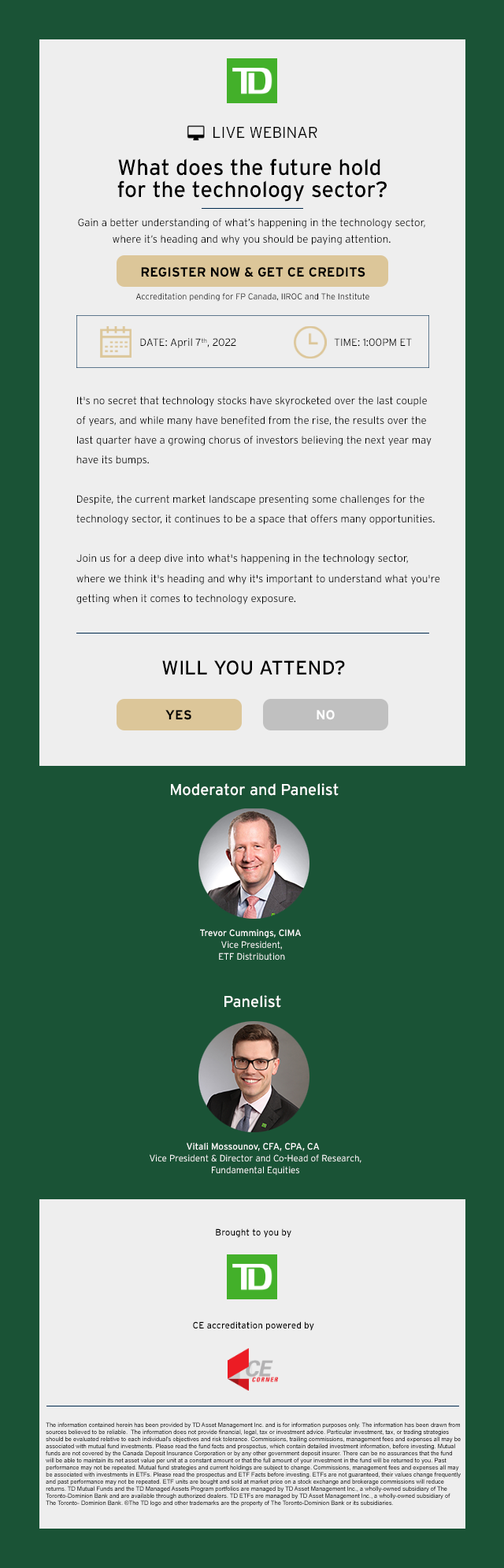
<style>
.page{position:relative;width:504px;height:1568px;background:#1a5336}
.page>*{position:absolute;margin:0}
.t1{font:15.8px "Interstate-Light";color:#000000}
.t2{font:22.1px/22.1px "Interstate-Regular";color:#000000}
.t3{font:10.5px/15.8px "Interstate-Light";color:#000000}
.t4{font:13.2px "Interstate-Bold";color:#000000}
.t5{font:8.6px "Interstate-Light";color:#000000}
.t6{font:10.5px "Interstate-Light";color:#000000}
.t7{font:10.5px/19.7px "Interstate-Light";color:#000000}
.t8{font:19.7px "Interstate-Regular";color:#000000}
.t9{font:13.2px "Interstate-Bold";color:#ffffff}
.t10{font:15.8px "Interstate-Regular";color:#ffffff}
.t11{font:9.2px/11.8px "Interstate-Light";color:#ffffff}
.t12{font:9.2px/11.8px "Interstate-Regular";color:#ffffff}
.t13{font:9.2px "Interstate-Regular";color:#000000}
.t14{font:5.9px "ArialMT";color:#000000}
</style>
<div class="page">
<p class="t1" style="left:214px;top:127px;width:104px;height:11px">LIVE WEBINAR</p>
<p class="t2" style="left:117px;top:158px;width:270px;height:44px;text-align:center">What does the future hold <br>for the technology sector?</p>
<p class="t3" style="left:78px;top:218px;width:347px;height:27px;text-align:center">Gain a better understanding of what’s happening in the technology sector, <br>where it’s heading and why you should be paying attention.</p>
<p class="t4" style="left:141px;top:267px;width:225px;height:10px">REGISTER NOW &amp; GET CE CREDITS</p>
<p class="t5" style="left:136px;top:293px;width:234px;height:8px">Accreditation pending for FP Canada, IIROC and The Institute</p>
<p class="t6" style="left:140px;top:338px;width:96px;height:10px">DATE: April 7th, 2022</p>
<p class="t6" style="left:334px;top:338px;width:78px;height:9px">TIME: 1:00PM ET</p>
<p class="t7" style="left:76px;top:396px;width:364px;height:208px">It's no secret that technology stocks have skyrocketed over the last couple <br>of years, and while many have benefited from the rise, the results over the <br>last quarter have a growing chorus of investors believing the next year may <br>have its bumps. <br> <br>Despite, the current market landscape presenting some challenges for the<br>technology sector, it continues to be a space that offers many opportunities.<br> <br>Join us for a deep dive into what's happening in the technology sector, <br>where we think it's heading and why it's important to understand what you're<br>getting when it comes to technology exposure.</p>
<p class="t8" style="left:162px;top:660px;width:183px;height:15px">WILL YOU ATTEND?</p>
<p class="t4" style="left:165px;top:710px;width:26px;height:10px">YES</p>
<p class="t9" style="left:317px;top:710px;width:18px;height:10px">NO</p>
<p class="t10" style="left:171px;top:783px;width:168px;height:13px">Moderator and Panelist</p>
<p class="t11" style="left:200px;top:929px;width:101px;height:31px;text-align:center"><span class="t12">Trevor Cummings, CIMA <br></span>Vice President,<br>ETF Distribution</p>
<p class="t10" style="left:225px;top:995px;width:56px;height:13px">Panelist</p>
<p class="t11" style="left:150px;top:1143px;width:212px;height:33px;text-align:center"><span class="t12">Vitali Mossounov, CFA, CPA, CA  <br></span>Vice President &amp; Director and Co-Head of Research,<br>Fundamental Equities</p>
<p class="t13" style="left:216px;top:1228px;width:76px;height:10px">Brought to you by</p>
<p class="t13" style="left:193px;top:1321px;width:121px;height:10px">CE accreditation powered by</p>
<p class="t14" style="left:46px;top:1422px;width:415px;height:85px">The information contained herein has been provided by TD Asset Management Inc. and is for information purposes only. The information has been drawn from<br>sources believed to be reliable.  The information does not provide financial, legal, tax or investment advice. Particular investment, tax, or trading strategies<br>should be evaluated relative to each individual's objectives and risk tolerance. Commissions, trailing commissions, management fees and expenses all may be<br>associated with mutual fund investments. Please read the fund facts and prospectus, which contain detailed investment information, before investing. Mutual<br>funds are not covered by the Canada Deposit Insurance Corporation or by any other government deposit insurer. There can be no assurances that the fund<br>will be able to maintain its net asset value per unit at a constant amount or that the full amount of your investment in the fund will be returned to you. Past<br>performance may not be repeated. Mutual fund strategies and current holdings are subject to change. Commissions, management fees and expenses all may<br>be associated with investments in ETFs. Please read the prospectus and ETF Facts before investing. ETFs are not guaranteed, their values change frequently<br>and past performance may not be repeated. ETF units are bought and sold at market price on a stock exchange and brokerage commissions will reduce<br>returns. TD Mutual Funds and the TD Managed Assets Program portfolios are managed by TD Asset Management Inc., a wholly-owned subsidiary of The<br>Toronto-Dominion Bank and are available through authorized dealers. TD ETFs are managed by TD Asset Management Inc., a wholly-owned subsidiary of<br>The Toronto- Dominion Bank. ®The TD logo and other trademarks are the property of The Toronto-Dominion Bank or its subsidiaries.</p>
</div>
